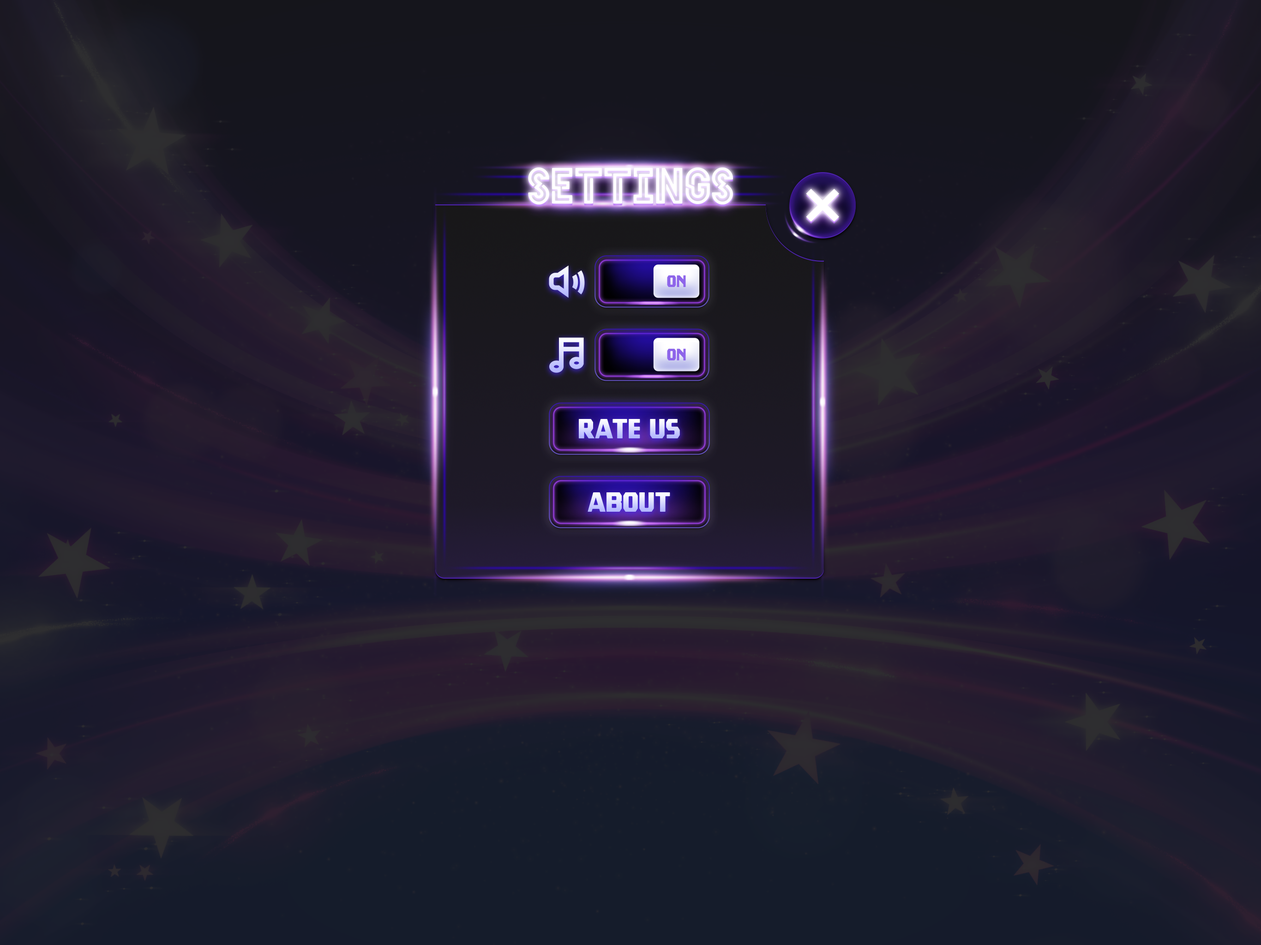
<style>
.page{position:relative;width:1261px;height:945px}
.page>*{position:absolute;margin:0}
.t1{font:50.8px "HELLODENVERDISPLAYBOLD-Bold";color:#ffffff;text-transform:uppercase}
.t2{font:16.6px "TradesmithRound";color:#8e65ea}
.t3{font:27.7px "TradesmithRound"}
</style>
<div class="page">
<p class="t1" style="left:528px;top:168px;width:205px;height:37px">Settings</p>
<p class="t2" style="left:667px;top:275px;width:19px;height:12px">on</p>
<p class="t2" style="left:667px;top:349px;width:19px;height:12px">on</p>
<p class="t3" style="left:579px;top:419px;width:101px;height:20px">Rate us</p>
<p class="t3" style="left:588px;top:493px;width:82px;height:19px">About</p>
</div>
